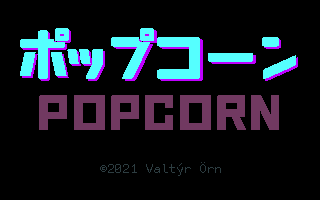
<style>
.page{position:relative;width:320px;height:200px;background:#000000}
.page>*{position:absolute;margin:0}
.t1{font:64.4px "Nikkyou-Sans";color:#55ffff;scale:1.07 1}
.t2{font:48px "Nikkyou-Sans";color:#713961;scale:1.1 1}
.t3{font:14px "FreePixel-Regular";color:#2d3d41;scale:1.1 1}
</style>
<div class="page">
<p class="t1" style="left:20px;top:28px;width:276px;height:51px">ポップコーン</p>
<p class="t1" style="left:22px;top:30px;width:276px;height:51px">ポップコーン</p>
<p class="t2" style="left:39px;top:95px;width:240px;height:35px">popcorn</p>
<p class="t3" style="left:100px;top:162px;width:121px;height:14px">©2021 Valtýr Örn</p>
</div>
